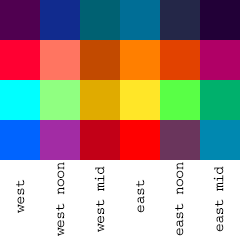
<style>
.page{position:relative;width:240px;height:240px;background:#ffffff}
.page>*{position:absolute;margin:0}
.t1{font:14.2px "Courier";letter-spacing:-0.02em;color:#000000}
.t2{font:14.2px "Courier";color:#000000}
</style>
<div class="page">
<p class="t1" style="left:56px;top:162px;width:9px;height:74px;rotate:-90deg">west noon</p>
<p class="t1" style="left:94px;top:166px;width:11px;height:66px;rotate:-90deg">west mid</p>
<p class="t1" style="left:175px;top:162px;width:9px;height:74px;rotate:-90deg">east noon</p>
<p class="t1" style="left:213px;top:166px;width:11px;height:66px;rotate:-90deg">east mid</p>
<p class="t2" style="left:16px;top:179px;width:9px;height:34px;rotate:-90deg">west</p>
<p class="t2" style="left:136px;top:179px;width:9px;height:34px;rotate:-90deg">east</p>
</div>
